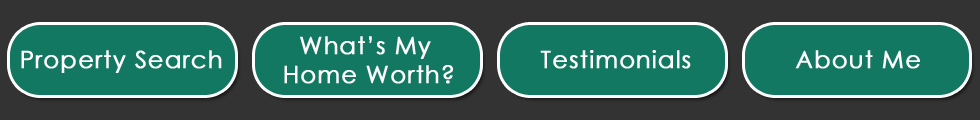
<style>
.page{position:relative;width:980px;height:120px;background:#137862}
.page>*{position:absolute;margin:0}
.t1{font:24px "CenturyGothic";letter-spacing:0.025em;color:#ffffff;font-weight:bold}
</style>
<div class="page">
<p class="t1" style="left:284px;top:36px;width:169px;height:48px;text-align:center">What’s My <br>Home Worth?</p>
<p class="t1" style="left:21px;top:50px;width:201px;height:23px">Property Search</p>
<p class="t1" style="left:540px;top:50px;width:151px;height:19px">Testimonials</p>
<p class="t1" style="left:795px;top:50px;width:125px;height:19px">About Me</p>
</div>
